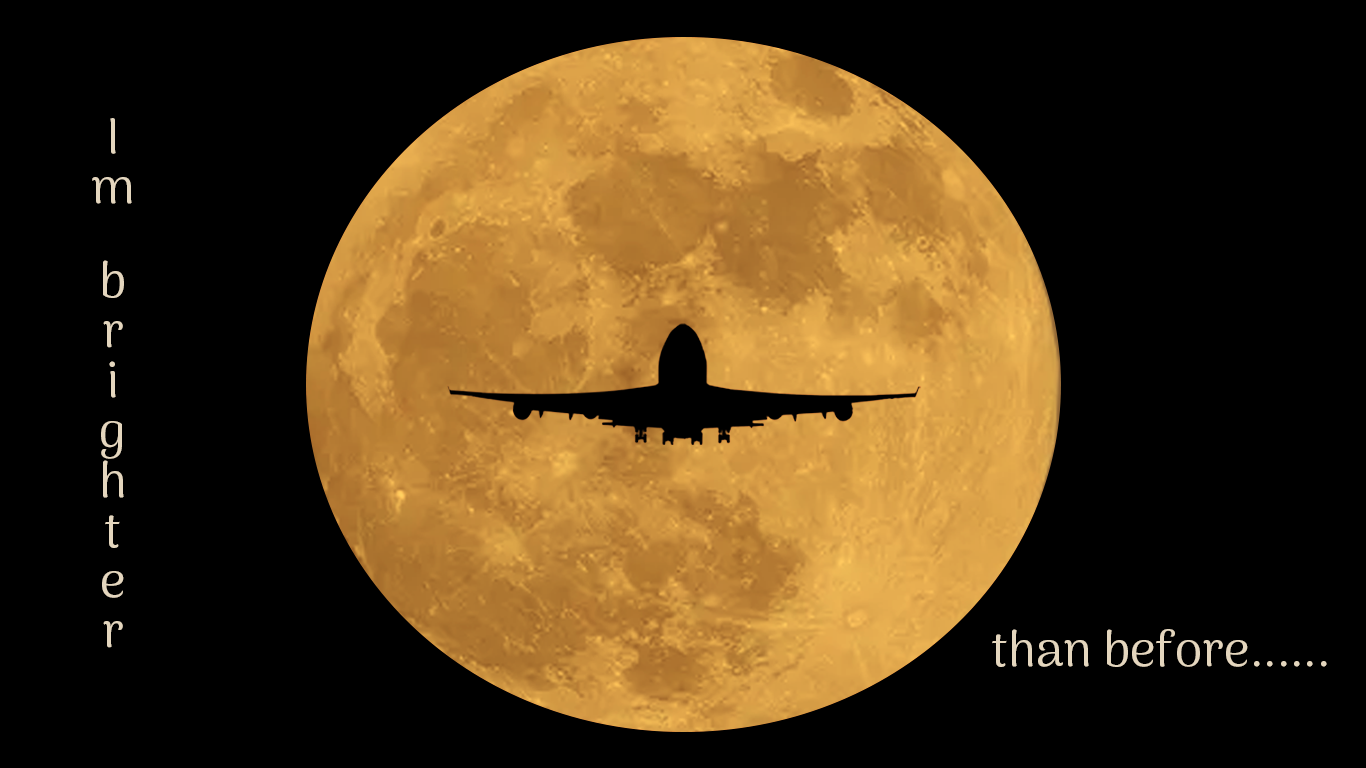
<style>
.page{position:relative;width:1366px;height:768px;background:#000000}
.page>*{position:absolute;margin:0}
.t1{font:50px "ArimaMadurai-Regular";color:#e4d6be}
</style>
<div class="page">
<p class="t1" style="left:92px;top:118px;width:40px;height:530px">Im    brighter</p>
<p class="t1" style="left:992px;top:629px;width:335px;height:38px">than before......</p>
</div>
